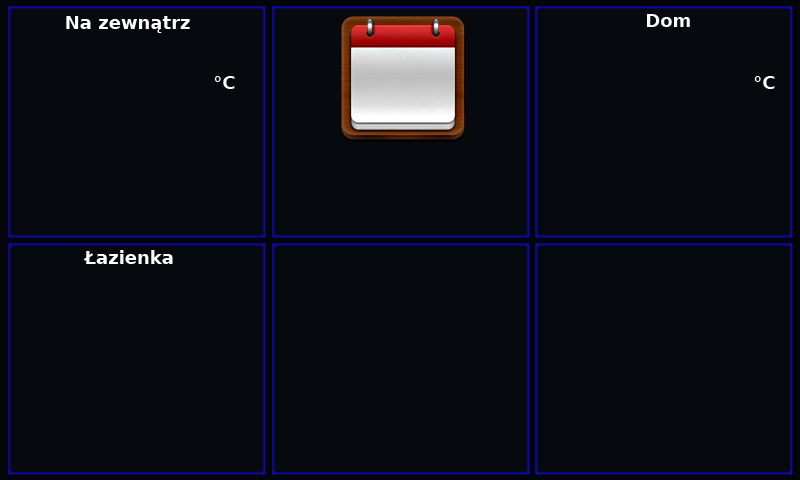
<style>
.page{position:relative;width:800px;height:480px;background:#06090d}
.page>*{position:absolute;margin:0}
.t1{font:18px "DejaVuSans-Bold";color:#ffffff}
</style>
<div class="page">
<p class="t1" style="left:66px;top:16px;width:124px;height:17px">Na zewnątrz</p>
<p class="t1" style="left:647px;top:14px;width:43px;height:13px">Dom</p>
<p class="t1" style="left:214px;top:76px;width:21px;height:13px">°C</p>
<p class="t1" style="left:754px;top:76px;width:21px;height:13px">°C</p>
<p class="t1" style="left:83px;top:250px;width:90px;height:14px">Łazienka</p>
</div>
